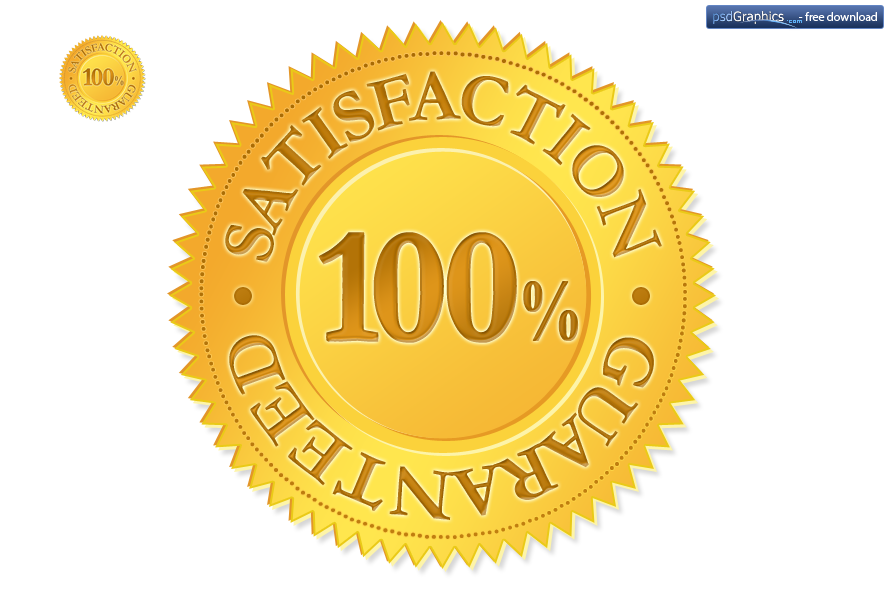
<style>
.page{position:relative;width:889px;height:600px;background:#ffffff}
.page>*{position:absolute;margin:0}
.t1{font:75px/25px "Garamond-Bold";letter-spacing:-0.07em;text-transform:uppercase}
.t2{font:161.5px "Garamond-Bold";letter-spacing:-0.04em;font-weight:bold}
.t3{font:161.5px "Garamond-Bold";letter-spacing:-0.09em;font-weight:bold}
.t4{font:89.6px "Garamond-Bold";letter-spacing:-0.05em;font-weight:bold;scale:0.77 1}
</style>
<div class="page">
<p class="t1" style="left:225px;top:71px;width:437px;height:449px">Satisfaction     Guaranteed</p>
<p class="t2" style="left:318px;top:232px;width:261px;height:111px"><span class="t3">1</span>00 <span class="t4">%</span></p>
</div>
